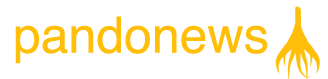
<style>
.page{position:relative;width:328px;height:79px;background:#ffffff}
.page>*{position:absolute;margin:0}
.t1{font:50px "Helvetica";color:#ffbf08}
</style>
<div class="page">
<p class="t1" style="left:15px;top:16px;width:253px;height:48px">pandonews</p>
</div>
